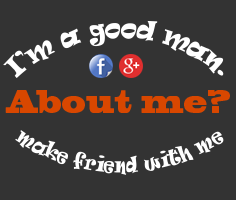
<style>
.page{position:relative;width:236px;height:200px;background:#333333}
.page>*{position:absolute;margin:0}
.t1{font:18px "Ravie";color:#ffffff}
.t2{font:30.9px "BlackoakStd";color:#d84700;scale:0.58 1}
.t3{font:16px "Ravie";color:#ffffff}
</style>
<div class="page">
<p class="t1" style="left:3px;top:20px;width:221px;height:59px;text-align:center">I’m a good man.</p>
<p class="t2" style="left:5px;top:90px;width:225px;height:23px">About me?</p>
<p class="t3" style="left:15px;top:130px;width:209px;height:45px;text-align:center">make friend with me</p>
</div>
